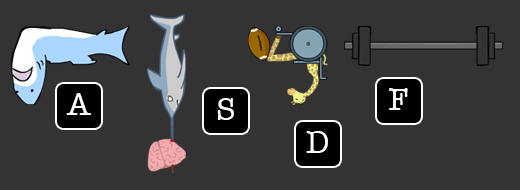
<style>
.page{position:relative;width:520px;height:190px;background:#333333}
.page>*{position:absolute;margin:0}
.t1{font:31.8px "AmericanTypewriter";color:#ffffff}
</style>
<div class="page">
<p class="t1" style="left:389px;top:88px;width:19px;height:22px">F</p>
<p class="t1" style="left:66px;top:93px;width:25px;height:22px">A</p>
<p class="t1" style="left:217px;top:98px;width:17px;height:22px">S</p>
<p class="t1" style="left:306px;top:131px;width:22px;height:22px">D</p>
</div>
